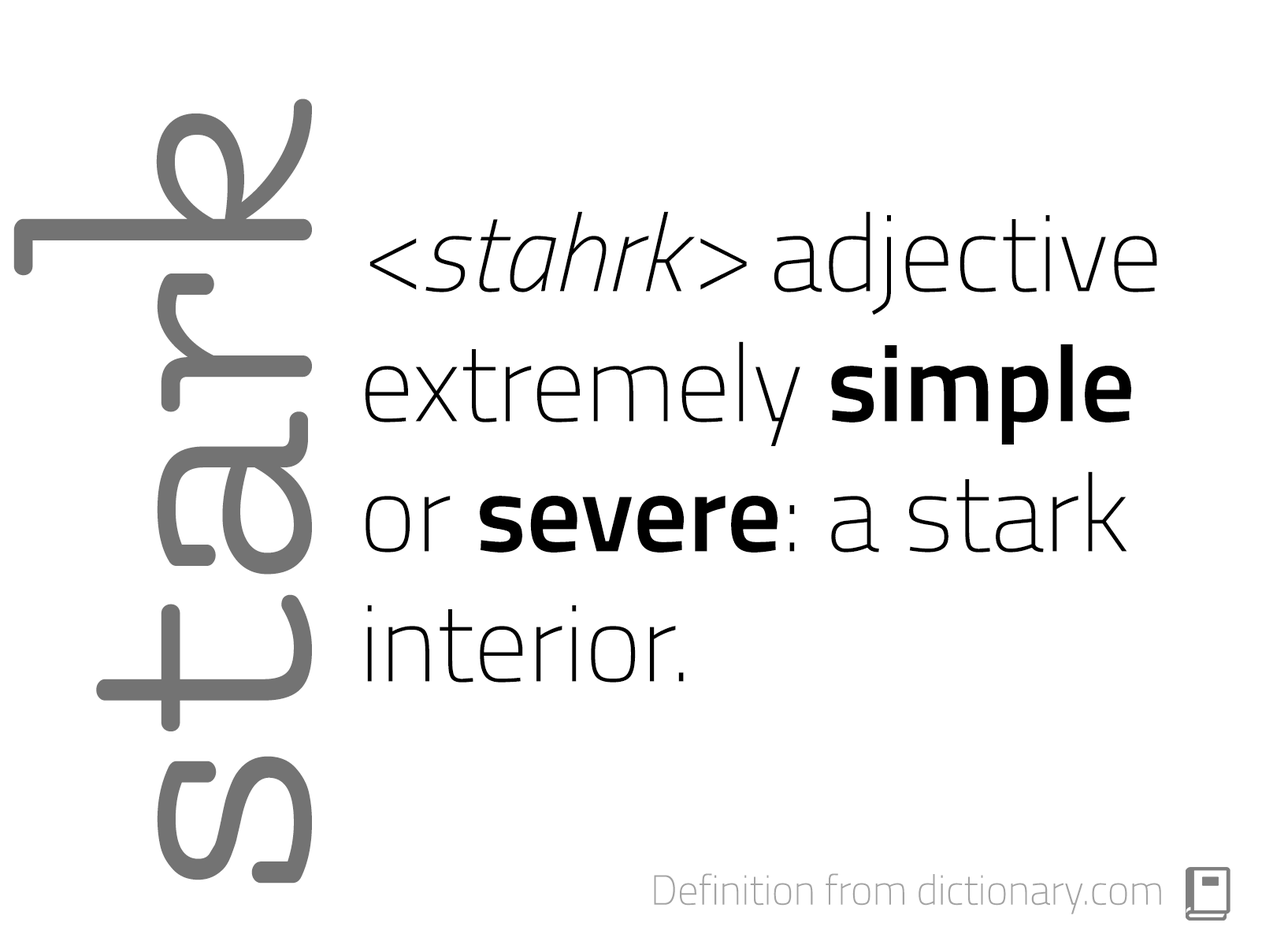
<style>
.page{position:relative;width:1262px;height:945px;background:#ffffff}
.page>*{position:absolute;margin:0}
.t1{font:391.9px "Flamenco-Regular";color:#737373}
.t2{font:108.3px "TitilliumWeb-Thin";color:#000000}
.t3{font:108.3px "TitilliumWeb-ThinItalic";color:#000000}
.t4{font:108.3px "TitilliumWeb-SemiBold";color:#000000}
.t5{font:41.6px "TitilliumWeb-Thin";color:#a3a3a3}
</style>
<div class="page">
<p class="t1" style="left:13px;top:98px;width:299px;height:785px;rotate:-90deg">stark</p>
<p class="t2" style="left:365px;top:211px;width:792px;height:471px"><span class="t3">&lt;stahrk&gt; </span>adjective<br>extremely <span class="t4">simple </span>or <span class="t4">severe</span>: a stark interior.</p>
<p class="t5" style="left:654px;top:873px;width:507px;height:41px">Definition from dictionary.com</p>
</div>
